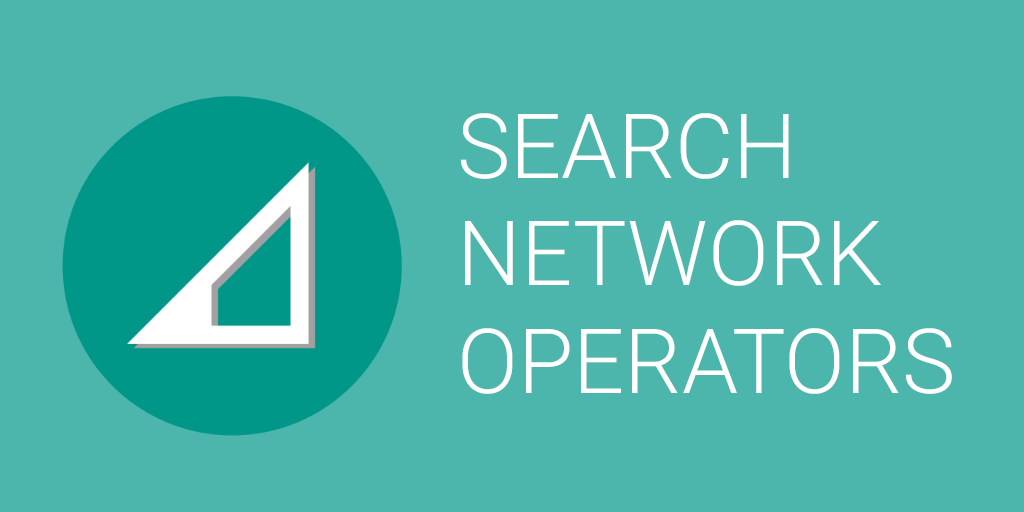
<style>
.page{position:relative;width:1024px;height:512px;background:#4db6ac}
.page>*{position:absolute;margin:0}
.t1{font:89.9px/107.4px "Roboto-Light";color:#ffffff;text-transform:uppercase}
</style>
<div class="page">
<p class="t1" style="left:460px;top:113px;width:492px;height:281px">Search<br>Network<br>Operators</p>
</div>
